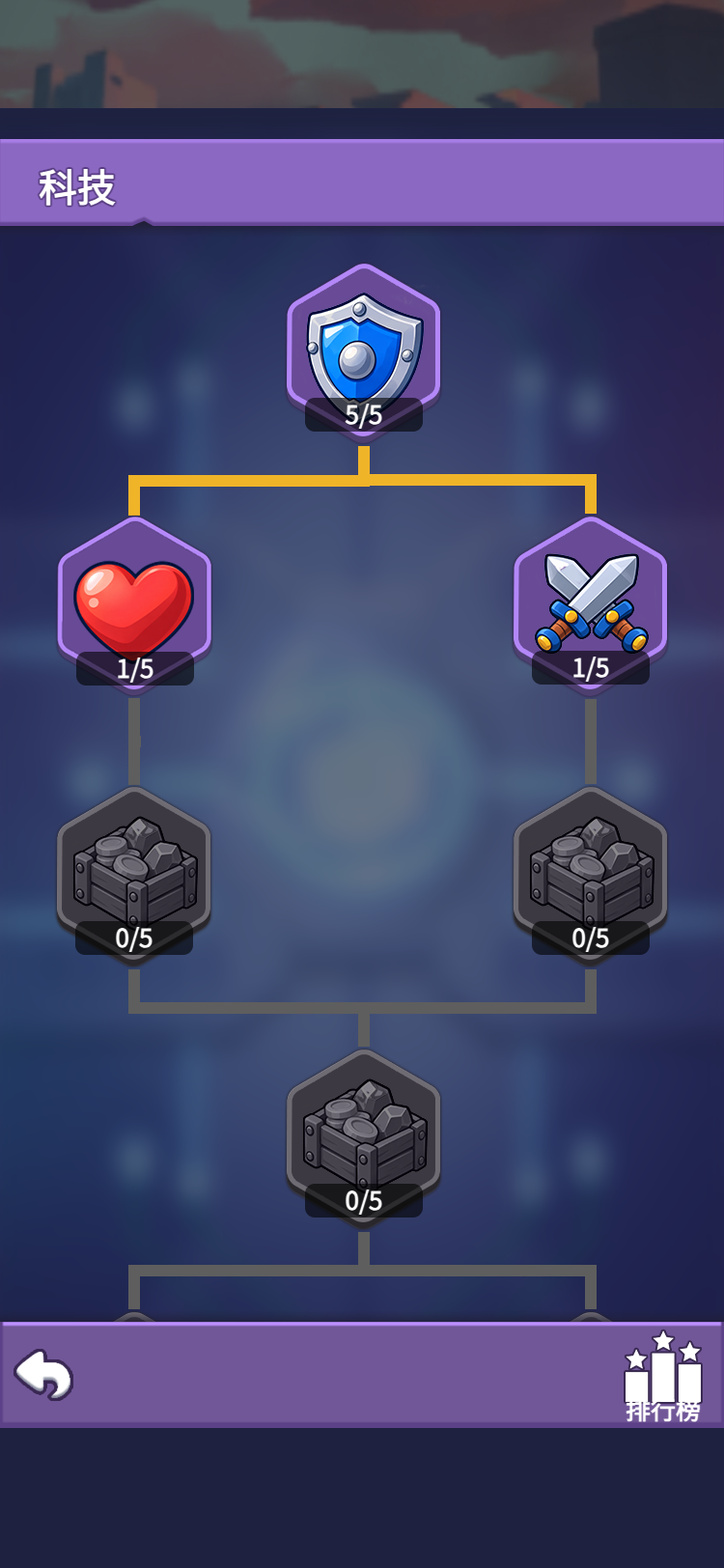
<style>
.page{position:relative;width:724px;height:1568px}
.page>*{position:absolute;margin:0}
.t1{font:38.6px "WebPSD-18463539-0-Regular";color:#ffffff;font-weight:bold}
.t2{font:25.1px "WebPSD-18463539-0-Regular";color:#ffffff;font-weight:bold}
</style>
<div class="page">
<p class="t1" style="left:37px;top:163px;width:193px;height:48px">科技</p>
<p class="t2" style="left:305px;top:398px;width:118px;height:34px">5/5</p>
<p class="t2" style="left:76px;top:652px;width:118px;height:34px">1/5</p>
<p class="t2" style="left:532px;top:651px;width:118px;height:34px">1/5</p>
<p class="t2" style="left:75px;top:921px;width:118px;height:34px">0/5</p>
<p class="t2" style="left:532px;top:921px;width:118px;height:34px">0/5</p>
<p class="t2" style="left:305px;top:1184px;width:118px;height:34px">0/5</p>
<p class="t2" style="left:624px;top:1397px;width:79px;height:25px">排行榜</p>
</div>
